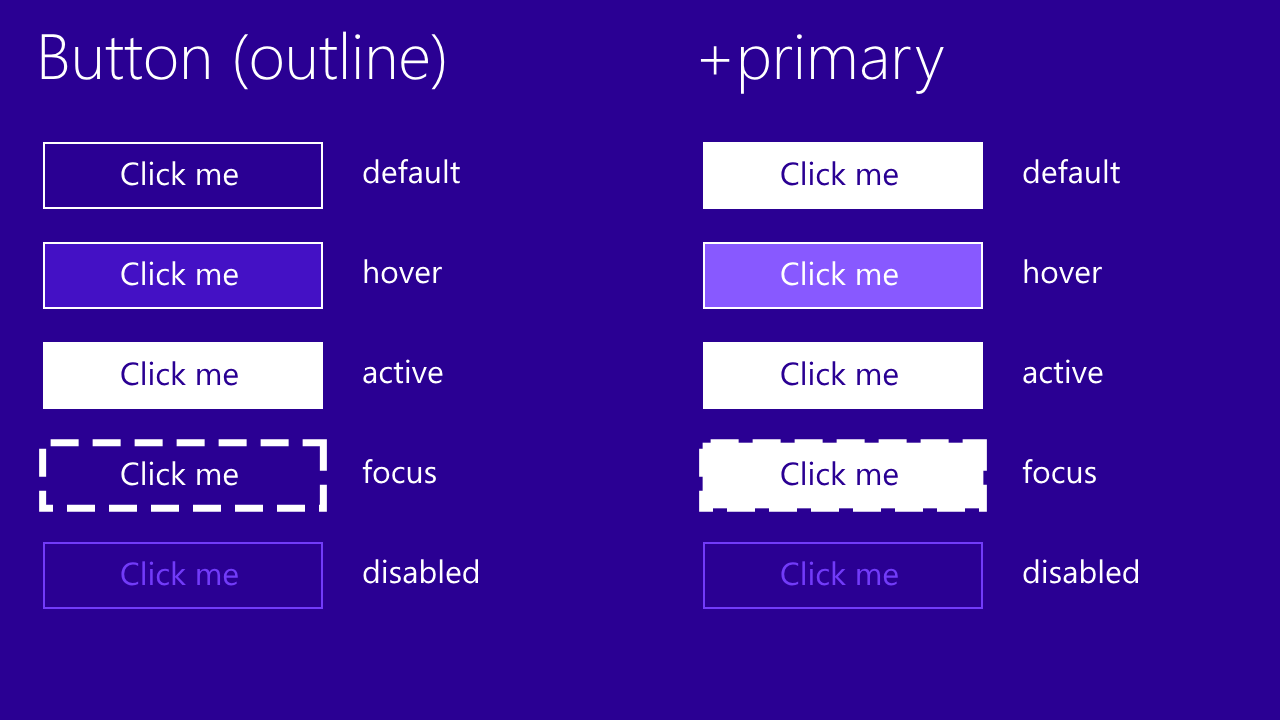
<style>
.page{position:relative;width:1280px;height:720px;background:#2a0093}
.page>*{position:absolute;margin:0}
.t1{font:64px "SegoeUI-Light";color:#ffffff}
.t2{font:32px "SegoeUI";color:#ffffff}
.t3{font:32px "SegoeUI";color:#2a0093}
.t4{font:32px "SegoeUI";color:#723bf9}
</style>
<div class="page">
<p class="t1" style="left:41px;top:31px;width:903px;height:64px">Button (outline)              +primary</p>
<p class="t2" style="left:121px;top:161px;width:117px;height:25px">Click me</p>
<p class="t2" style="left:363px;top:158px;width:97px;height:26px">default</p>
<p class="t3" style="left:781px;top:161px;width:117px;height:25px">Click me</p>
<p class="t2" style="left:1023px;top:158px;width:97px;height:26px">default</p>
<p class="t2" style="left:121px;top:261px;width:117px;height:25px">Click me</p>
<p class="t2" style="left:364px;top:259px;width:78px;height:25px">hover</p>
<p class="t2" style="left:781px;top:261px;width:117px;height:25px">Click me</p>
<p class="t2" style="left:1024px;top:259px;width:78px;height:25px">hover</p>
<p class="t3" style="left:121px;top:361px;width:117px;height:25px">Click me</p>
<p class="t2" style="left:363px;top:359px;width:80px;height:25px">active</p>
<p class="t3" style="left:781px;top:361px;width:117px;height:25px">Click me</p>
<p class="t2" style="left:1023px;top:359px;width:80px;height:25px">active</p>
<p class="t2" style="left:121px;top:461px;width:117px;height:25px">Click me</p>
<p class="t2" style="left:362px;top:458px;width:74px;height:26px">focus</p>
<p class="t3" style="left:781px;top:461px;width:117px;height:25px">Click me</p>
<p class="t2" style="left:1022px;top:458px;width:74px;height:26px">focus</p>
<p class="t4" style="left:121px;top:561px;width:117px;height:25px">Click me</p>
<p class="t2" style="left:363px;top:559px;width:115px;height:25px">disabled</p>
<p class="t4" style="left:781px;top:561px;width:117px;height:25px">Click me</p>
<p class="t2" style="left:1023px;top:559px;width:115px;height:25px">disabled</p>
</div>
